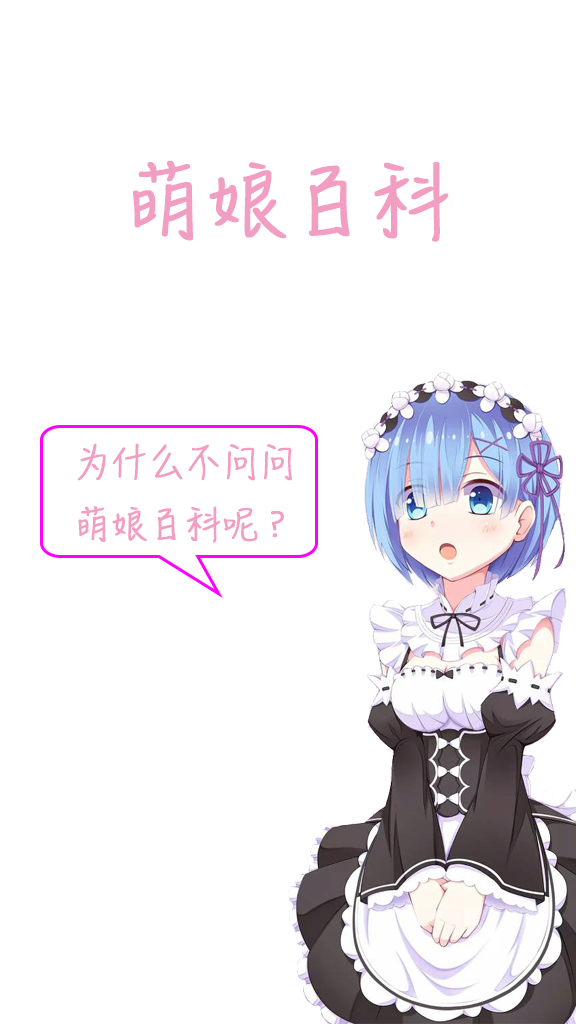
<style>
.page{position:relative;width:576px;height:1024px;background:#ffffff}
.page>*{position:absolute;margin:0}
.t1{font:77.9px "HanziPenSC-W3";color:#f19ec2;font-weight:bold}
.t2{font:35px "HanziPenSC-W3";color:#f19ec2;font-weight:bold}
</style>
<div class="page">
<p class="t1" style="left:133px;top:160px;width:316px;height:82px">萌娘百科</p>
<p class="t2" style="left:77px;top:443px;width:215px;height:100px">为什么不问问<br>萌娘百科呢？</p>
</div>
